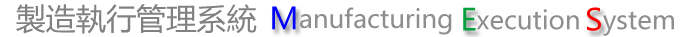
<style>
.page{position:relative;width:680px;height:37px;background:#ffffff}
.page>*{position:absolute;margin:0}
.t1{font:29.9px "MicrosoftYaHei";color:#818181}
.t2{font:29.9px "MicrosoftYaHei";color:#0000ff}
.t3{font:25.2px "MicrosoftYaHei";color:#8e8e8e}
.t4{font:29.9px "MicrosoftYaHei";color:#009f3c}
.t5{font:29.9px "MicrosoftYaHei";color:#ff0000}
</style>
<div class="page">
<p class="t1" style="left:16px;top:4px;width:241px;height:30px">製造執行管理系統</p>
<p class="t2" style="left:272px;top:6px;width:24px;height:24px">M</p>
<p class="t3" style="left:300px;top:7px;width:152px;height:28px">anufacturing</p>
<p class="t4" style="left:463px;top:7px;width:13px;height:24px">E</p>
<p class="t3" style="left:476px;top:9px;width:103px;height:21px">xecution</p>
<p class="t5" style="left:587px;top:7px;width:14px;height:24px">S</p>
<p class="t3" style="left:603px;top:11px;width:71px;height:25px">ystem</p>
</div>
